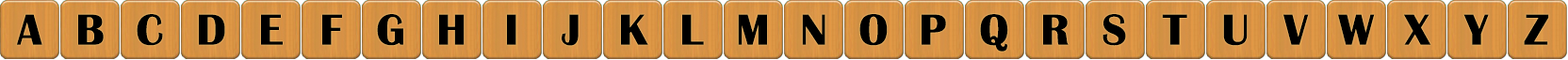
<style>
.page{position:relative;width:1568px;height:60px}
.page>*{position:absolute;margin:0}
.t1{font:45.2px "BritannicBold";color:#000000}
</style>
<div class="page">
<p class="t1" style="left:17px;top:14px;width:25px;height:31px">A</p>
<p class="t1" style="left:78px;top:14px;width:26px;height:31px">B</p>
<p class="t1" style="left:137px;top:14px;width:26px;height:32px">C</p>
<p class="t1" style="left:199px;top:14px;width:26px;height:31px">D</p>
<p class="t1" style="left:261px;top:14px;width:22px;height:31px">E</p>
<p class="t1" style="left:322px;top:14px;width:20px;height:31px">F</p>
<p class="t1" style="left:377px;top:14px;width:26px;height:32px">G</p>
<p class="t1" style="left:439px;top:14px;width:26px;height:31px">H</p>
<p class="t1" style="left:507px;top:14px;width:9px;height:31px">I</p>
<p class="t1" style="left:562px;top:14px;width:17px;height:32px">J</p>
<p class="t1" style="left:621px;top:14px;width:27px;height:31px">K</p>
<p class="t1" style="left:682px;top:14px;width:22px;height:31px">L</p>
<p class="t1" style="left:738px;top:14px;width:29px;height:31px">M</p>
<p class="t1" style="left:802px;top:14px;width:23px;height:31px">N</p>
<p class="t1" style="left:859px;top:14px;width:29px;height:32px">O</p>
<p class="t1" style="left:922px;top:14px;width:24px;height:31px">P</p>
<p class="t1" style="left:980px;top:14px;width:28px;height:38px">Q</p>
<p class="t1" style="left:1043px;top:14px;width:26px;height:31px">R</p>
<p class="t1" style="left:1102px;top:14px;width:24px;height:32px">S</p>
<p class="t1" style="left:1162px;top:14px;width:25px;height:31px">T</p>
<p class="t1" style="left:1223px;top:14px;width:25px;height:32px">U</p>
<p class="t1" style="left:1283px;top:14px;width:26px;height:31px">V</p>
<p class="t1" style="left:1338px;top:14px;width:37px;height:31px">W</p>
<p class="t1" style="left:1404px;top:14px;width:27px;height:31px">X</p>
<p class="t1" style="left:1463px;top:14px;width:26px;height:31px">Y</p>
<p class="t1" style="left:1524px;top:14px;width:25px;height:31px">Z</p>
</div>
